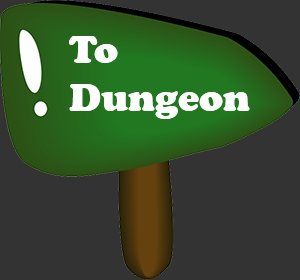
<style>
.page{position:relative;width:300px;height:280px;background:#333333}
.page>*{position:absolute;margin:0}
.t1{font:40px "CooperBlack";color:#ffffff}
</style>
<div class="page">
<p class="t1" style="left:69px;top:36px;width:181px;height:83px">To<br>Dungeon</p>
</div>
